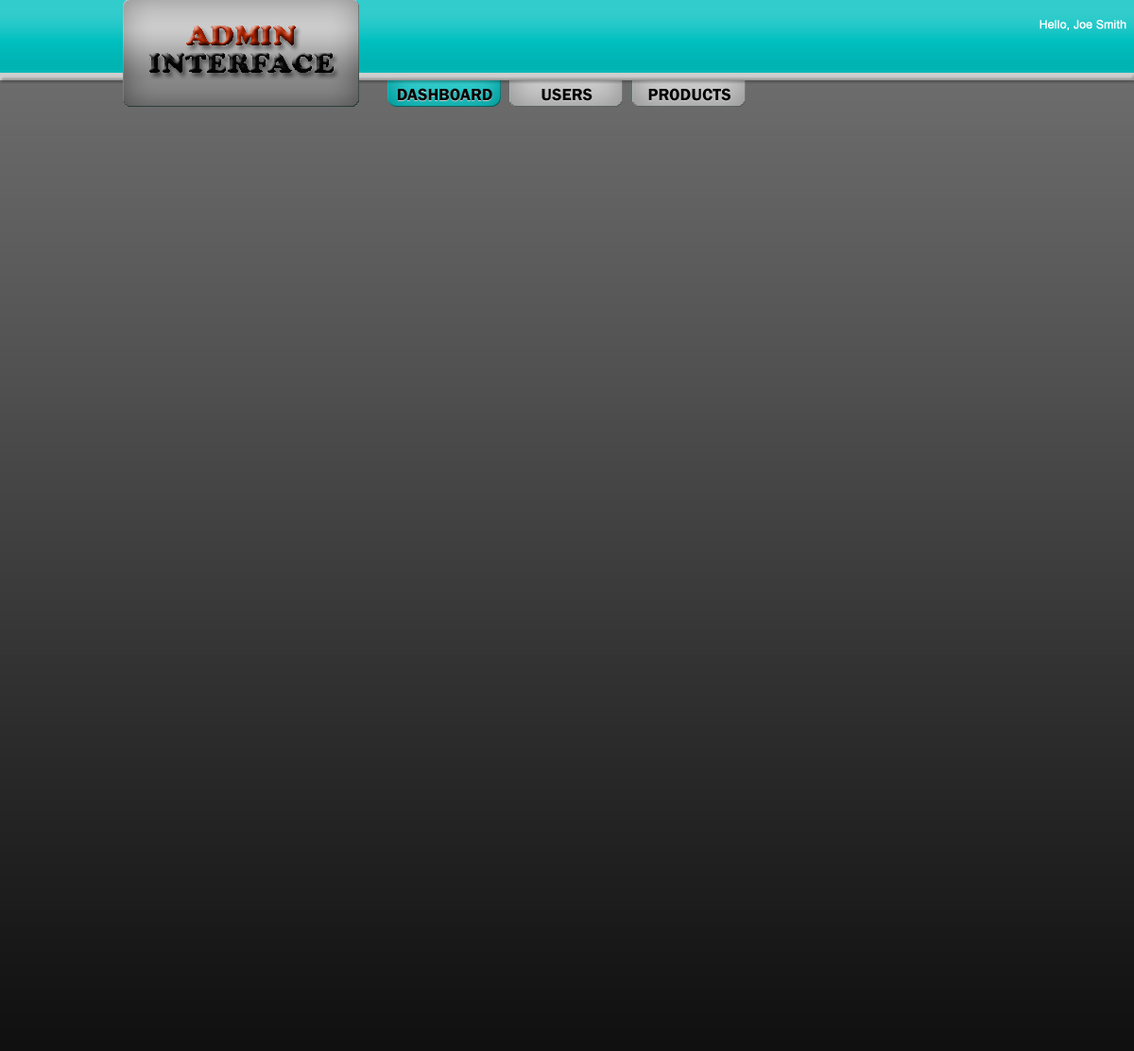
<style>
.page{position:relative;width:1134px;height:1051px}
.page>*{position:absolute;margin:0}
.t1{font:28.4px/6.6px "CooperBlackStd";text-transform:uppercase}
.t2{font:11.3px "ArialMT";color:#fffefe;font-weight:bold}
.t3{font:17px "FranklinGothic-Demi";color:#010101;text-transform:uppercase}
</style>
<div class="page">
<p class="t1" style="left:149px;top:26px;width:185px;height:47px;text-align:center">Admin<br><br><br><br><br><br><br><br><br><br><br><br>Interface</p>
<p class="t2" style="left:1040px;top:20px;width:87px;height:10px">Hello, Joe Smith</p>
<p class="t3" style="left:398px;top:89px;width:95px;height:13px">DashBoard</p>
<p class="t3" style="left:398px;top:88px;width:95px;height:13px">DashBoard</p>
<p class="t3" style="left:542px;top:89px;width:51px;height:13px">Users</p>
<p class="t3" style="left:542px;top:88px;width:51px;height:13px">Users</p>
<p class="t3" style="left:648px;top:89px;width:83px;height:13px">Products</p>
<p class="t3" style="left:648px;top:88px;width:83px;height:13px">Products</p>
</div>
